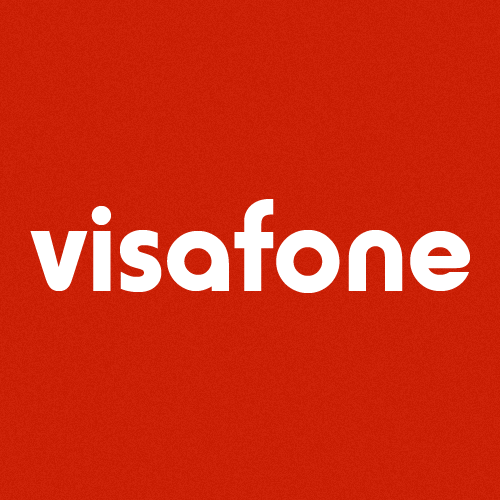
<style>
.page{position:relative;width:500px;height:500px}
.page>*{position:absolute;margin:0}
.t1{font:138.5px "HoratioD-Bold";color:#ffffff}
</style>
<div class="page">
<p class="t1" style="left:30px;top:199px;width:440px;height:94px">visafone</p>
</div>
